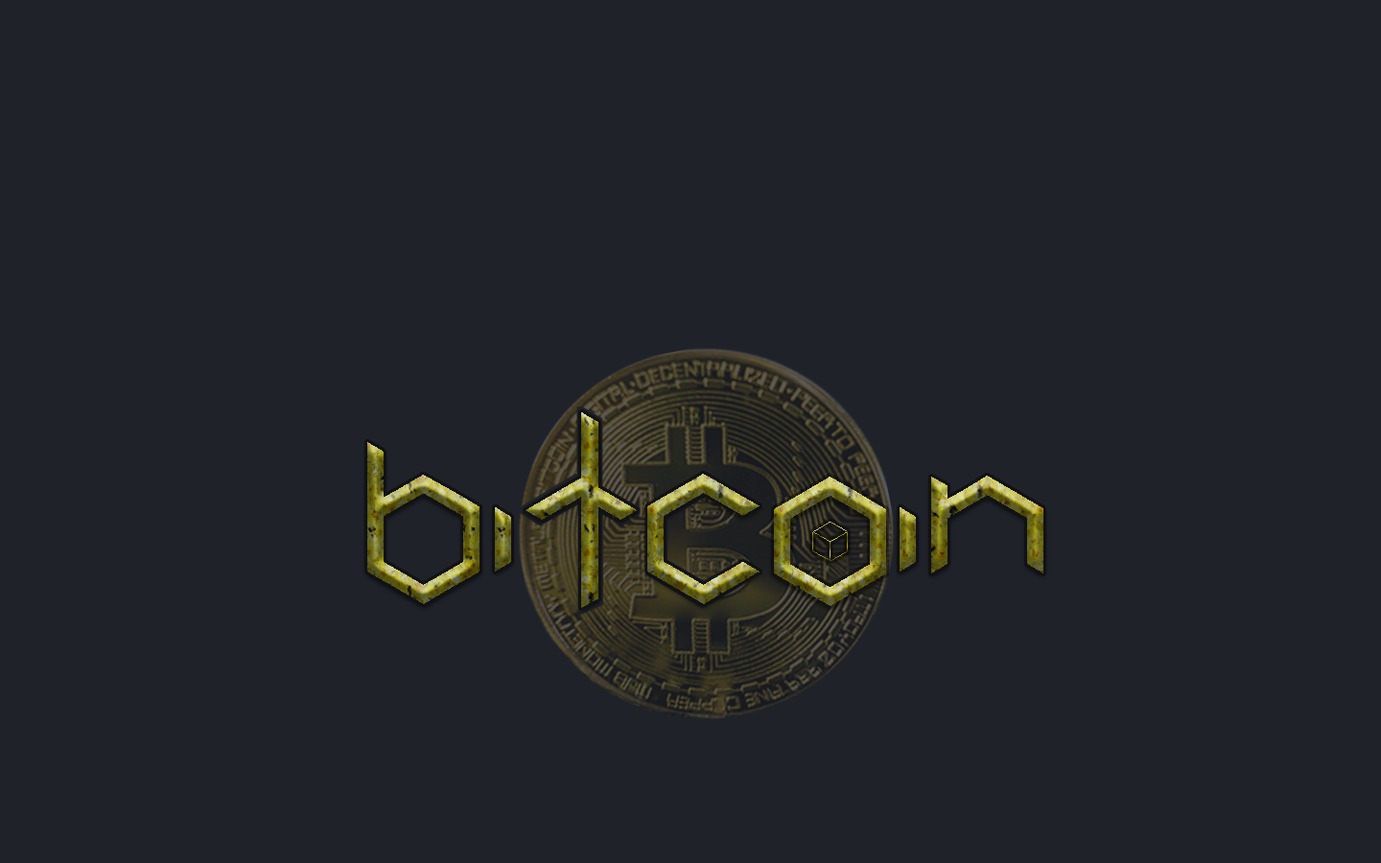
<style>
.page{position:relative;width:1381px;height:863px;background:#1f2229}
.page>*{position:absolute;margin:0}
.t1{font:153.5px "Cubic"}
</style>
<div class="page">
<p class="t1" style="left:367px;top:412px;width:677px;height:196px">Bitcoin</p>
</div>
